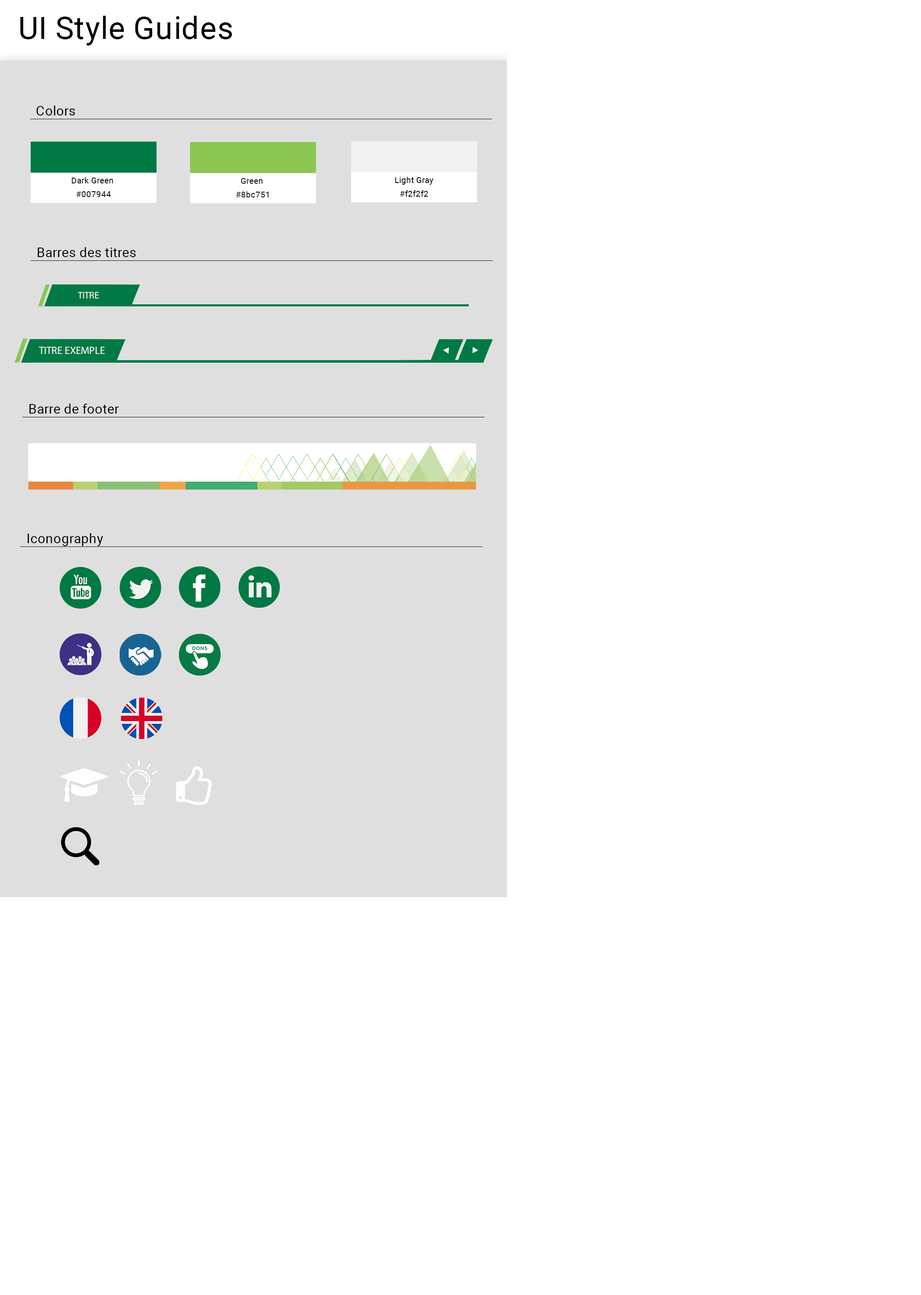
<style>
.page{position:relative;width:921px;height:1295px;background:#ffffff}
.page>*{position:absolute;margin:0}
.t1{font:31.1px "Roboto-Regular";letter-spacing:0.025em;color:#000000}
.t2{font:13.1px "Roboto-Regular";letter-spacing:0.025em;color:#000000}
.t3{font:8.3px/13.7px "Roboto-Regular";letter-spacing:0.025em;color:#000000}
.t4{font:13.6px "MyriadArabic-Regular";color:#ffffff}
.t5{font:14.9px "MyriadArabic-Regular";color:#ffffff}
</style>
<div class="page">
<p class="t1" style="left:20px;top:16px;width:212px;height:30px">UI Style Guides</p>
<p class="t2" style="left:36px;top:106px;width:39px;height:10px">Colors</p>
<p class="t3" style="left:72px;top:177px;width:41px;height:20px;text-align:center">Dark Green <br>#007944</p>
<p class="t3" style="left:236px;top:178px;width:33px;height:19px;text-align:center">Green <br>#8bc751</p>
<p class="t3" style="left:395px;top:177px;width:38px;height:20px;text-align:center">Light Gray<br>#f2f2f2</p>
<p class="t2" style="left:38px;top:247px;width:98px;height:10px">Barres des titres</p>
<p class="t4" style="left:78px;top:292px;width:21px;height:7px">TITRE</p>
<p class="t5" style="left:39px;top:347px;width:66px;height:7px">TITRE EXEMPLE</p>
<p class="t2" style="left:29px;top:404px;width:90px;height:10px">Barre de footer</p>
<p class="t2" style="left:27px;top:533px;width:76px;height:13px">Iconography</p>
</div>
